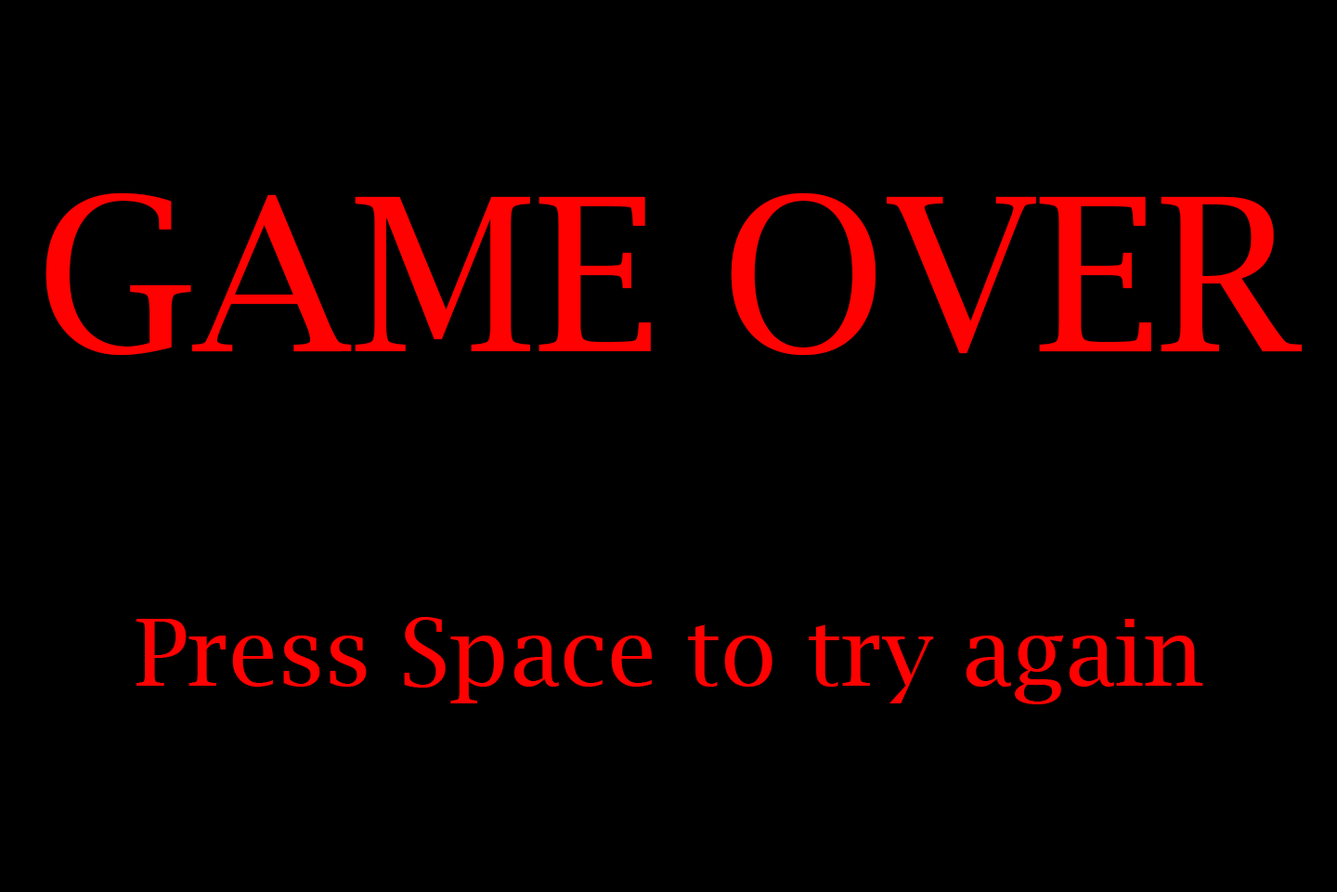
<style>
.page{position:relative;width:1337px;height:892px;background:#000000}
.page>*{position:absolute;margin:0}
.t1{font:92.9px "LucidaBright";color:#ff0101}
.t2{font:139.3px "Calibri";color:#ff0101}
.t3{font:213.6px "LucidaBright";color:#ff0101}
</style>
<div class="page">
<p class="t1" style="left:46px;top:192px;width:1257px;height:512px;text-align:center"><span class="t2"><br></span><span class="t3">GAME OVER<br></span><br><br>Press Space to try again</p>
</div>
